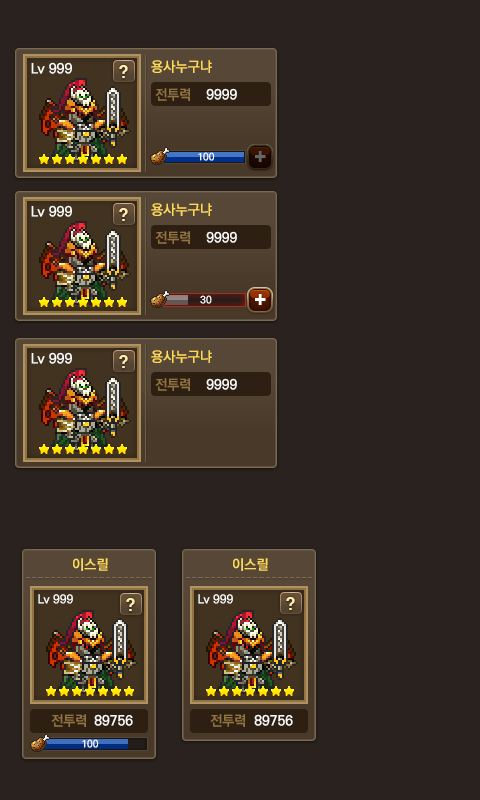
<style>
.page{position:relative;width:480px;height:800px;background:#29221e}
.page>*{position:absolute;margin:0}
.t1{font:14px "KoPubDotumBold";color:#ffffff}
.t2{font:16px "H2gtrE";color:#ffeeb0}
.t3{font:14px "KoPubDotumBold";color:#ffda5a}
.t4{font:14px "KoPubDotumBold";color:#937441}
.t5{font:10px "KoPubDotumBold";color:#ffffff}
.t6{font:22.5px "H2gtrE";color:#666666}
.t7{font:22.5px "H2gtrE";color:#ffffff}
.t8{font:12px "KoPubDotumBold";color:#ffffff}
</style>
<div class="page">
<p class="t1" style="left:31px;top:62px;width:41px;height:12px">Lv 999</p>
<p class="t2" style="left:119px;top:65px;width:9px;height:13px">?</p>
<p class="t3" style="left:151px;top:60px;width:61px;height:13px">용사누구냐</p>
<p class="t4" style="left:155px;top:88px;width:35px;height:13px">전투력</p>
<p class="t1" style="left:206px;top:88px;width:31px;height:12px">9999</p>
<p class="t5" style="left:198px;top:152px;width:17px;height:9px">100</p>
<p class="t6" style="left:255px;top:151px;width:11px;height:11px">+</p>
<p class="t1" style="left:31px;top:205px;width:41px;height:12px">Lv 999</p>
<p class="t2" style="left:119px;top:208px;width:9px;height:13px">?</p>
<p class="t3" style="left:151px;top:203px;width:61px;height:13px">용사누구냐</p>
<p class="t4" style="left:155px;top:231px;width:35px;height:13px">전투력</p>
<p class="t1" style="left:206px;top:231px;width:31px;height:12px">9999</p>
<p class="t7" style="left:255px;top:294px;width:11px;height:11px">+</p>
<p class="t5" style="left:200px;top:295px;width:12px;height:9px">30</p>
<p class="t1" style="left:31px;top:352px;width:41px;height:12px">Lv 999</p>
<p class="t3" style="left:151px;top:350px;width:61px;height:13px">용사누구냐</p>
<p class="t2" style="left:119px;top:355px;width:9px;height:13px">?</p>
<p class="t4" style="left:155px;top:378px;width:35px;height:13px">전투력</p>
<p class="t1" style="left:206px;top:378px;width:31px;height:12px">9999</p>
<p class="t3" style="left:73px;top:558px;width:35px;height:13px">이스릴</p>
<p class="t3" style="left:233px;top:558px;width:35px;height:13px">이스릴</p>
<p class="t8" style="left:38px;top:594px;width:35px;height:10px">Lv 999</p>
<p class="t2" style="left:126px;top:598px;width:9px;height:13px">?</p>
<p class="t8" style="left:198px;top:594px;width:35px;height:10px">Lv 999</p>
<p class="t4" style="left:51px;top:714px;width:35px;height:13px">전투력</p>
<p class="t1" style="left:94px;top:714px;width:39px;height:12px">89756</p>
<p class="t4" style="left:210px;top:714px;width:35px;height:13px">전투력</p>
<p class="t1" style="left:254px;top:714px;width:39px;height:12px">89756</p>
<p class="t5" style="left:82px;top:739px;width:17px;height:9px">100</p>
</div>
